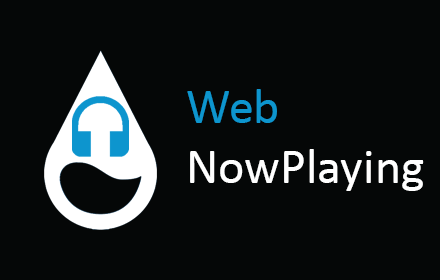
<style>
.page{position:relative;width:440px;height:280px;background:#050707}
.page>*{position:absolute;margin:0}
.t1{font:50px "Calibri";color:#ffffff}
.t2{font:50px "Calibri";color:#0d95ce}
</style>
<div class="page">
<p class="t1" style="left:187px;top:89px;width:237px;height:102px"><span class="t2">Web<br></span>NowPlaying</p>
</div>
